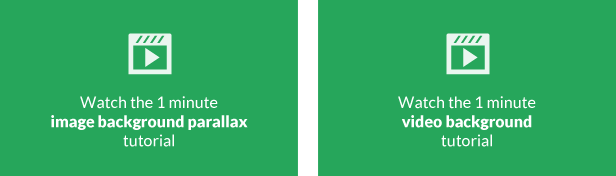
<style>
.page{position:relative;width:616px;height:176px;background:#26a65b}
.page>*{position:absolute;margin:0}
.t1{font:16px "Lato-Black";color:#ffffff}
.t2{font:16px "Lato-Regular";color:#ffffff}
</style>
<div class="page">
<p class="t1" style="left:51px;top:96px;width:197px;height:51px;text-align:center"><span class="t2">Watch the 1 minute<br></span>image background parallax<br><span class="t2">tutorial</span></p>
<p class="t2" style="left:398px;top:96px;width:138px;height:51px;text-align:center">Watch the 1 minute<br><span class="t1">video background<br></span>tutorial</p>
</div>
